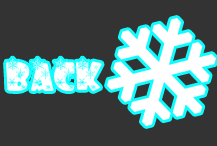
<style>
.page{position:relative;width:217px;height:146px;background:#333333}
.page>*{position:absolute;margin:0}
.t1{font:45px "winterflakes";color:#ffffff}
</style>
<div class="page">
<p class="t1" style="left:6px;top:58px;width:96px;height:33px">BACk</p>
</div>
